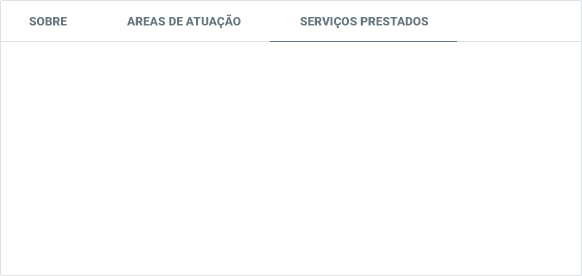
<style>
.page{position:relative;width:582px;height:276px;background:#ffffff}
.page>*{position:absolute;margin:0}
.t1{font:12px "Roboto-Black";color:#667780;text-transform:uppercase}
</style>
<div class="page">
<p class="t1" style="left:29px;top:17px;width:38px;height:9px">Sobre</p>
<p class="t1" style="left:127px;top:14px;width:114px;height:15px">areas de atuação</p>
<p class="t1" style="left:300px;top:17px;width:128px;height:12px">serviços prestados</p>
</div>
